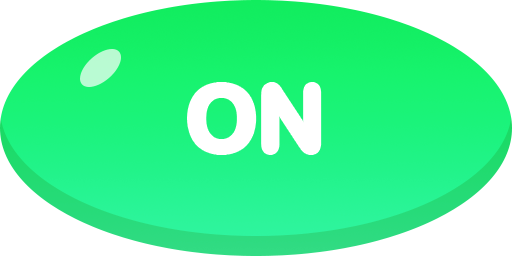
<style>
.page{position:relative;width:512px;height:256px;background:#ffffff}
.page>*{position:absolute;margin:0}
.t1{font:89.6px "ArialRoundedMTBold";color:#ffffff}
</style>
<div class="page">
<p class="t1" style="left:190px;top:85px;width:129px;height:67px">ON</p>
</div>
